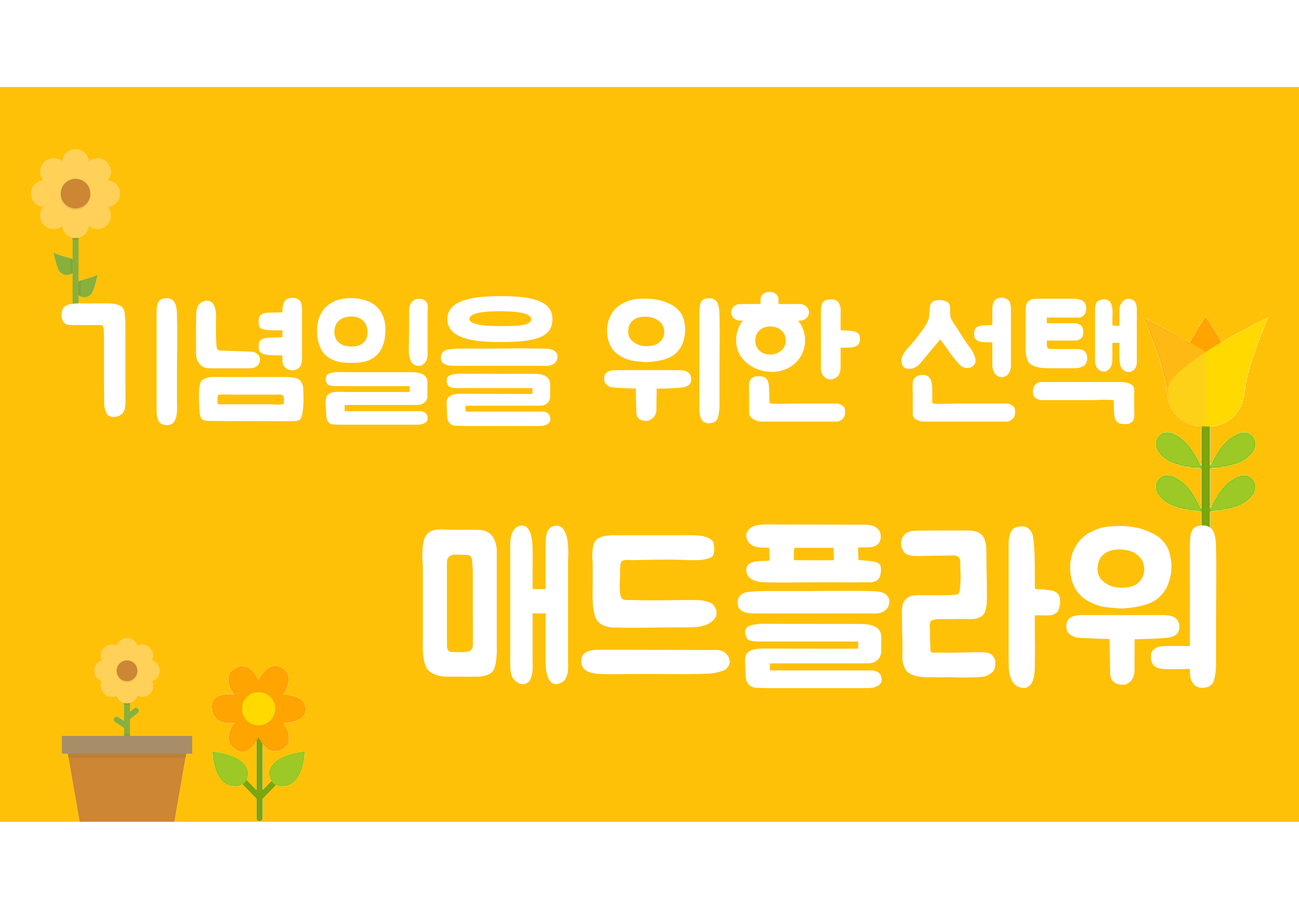
<style>
.page{position:relative;width:1299px;height:918px;background:#ffc107}
.page>*{position:absolute;margin:0}
.t1{font:154.3px "BMJUAOTF";color:#ffffff}
.t2{font:200.5px "BMJUAOTF";color:#ffffff}
</style>
<div class="page">
<p class="t1" style="left:61px;top:292px;width:1076px;height:134px">기념일을 위한 선택</p>
<p class="t2" style="left:422px;top:524px;width:794px;height:164px">매드플라워</p>
</div>
